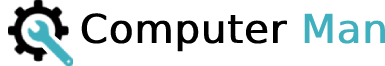
<style>
.page{position:relative;width:385px;height:66px;background:#ffffff}
.page>*{position:absolute;margin:0}
.t1{font:40px "DejaVuSans";color:#000000;font-weight:bold}
.t2{font:40px "DejaVuSans";color:#40b0be;font-weight:bold}
</style>
<div class="page">
<p class="t1" style="left:81px;top:13px;width:304px;height:39px">Computer <span class="t2">Man</span></p>
</div>
